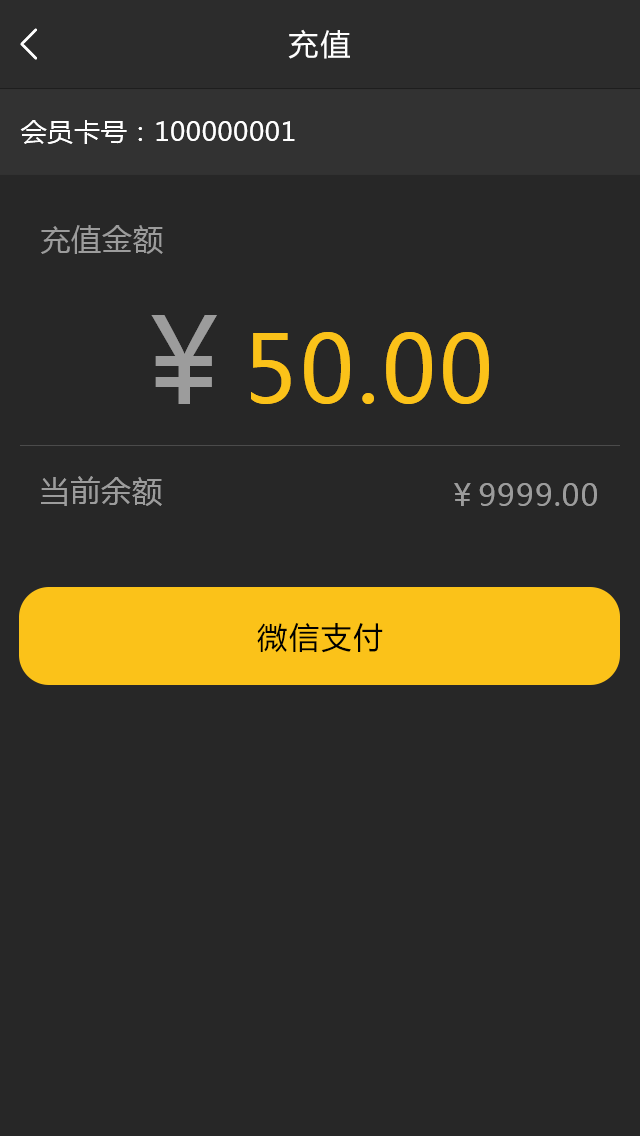
<style>
.page{position:relative;width:640px;height:1136px;background:#272727}
.page>*{position:absolute;margin:0}
.t1{font:30px "MicrosoftYaHei";letter-spacing:0.07em;color:#ffffff}
.t2{font:26px "MicrosoftYaHei";letter-spacing:0.03em;color:#ffffff}
.t3{font:30px "MicrosoftYaHei";letter-spacing:0.03em;color:#9c9c9c}
.t4{font:118.1px "MicrosoftYaHei";letter-spacing:0.03em;color:#9c9c9c}
.t5{font:92.5px "MicrosoftYaHei";letter-spacing:0.03em;color:#fbc219}
.t6{font:30px "MicrosoftYaHei";letter-spacing:0.07em;color:#000000}
</style>
<div class="page">
<p class="t1" style="left:288px;top:29px;width:62px;height:30px">充值</p>
<p class="t2" style="left:20px;top:120px;width:275px;height:24px">会员卡号：100000001</p>
<p class="t3" style="left:41px;top:225px;width:122px;height:29px">充值金额</p>
<p class="t4" style="left:151px;top:315px;width:66px;height:89px">￥</p>
<p class="t5" style="left:251px;top:332px;width:238px;height:72px">50.00</p>
<p class="t3" style="left:41px;top:476px;width:121px;height:30px">当前余额</p>
<p class="t3" style="left:454px;top:483px;width:143px;height:23px">￥9999.00</p>
<p class="t6" style="left:257px;top:623px;width:126px;height:30px">微信支付</p>
</div>
